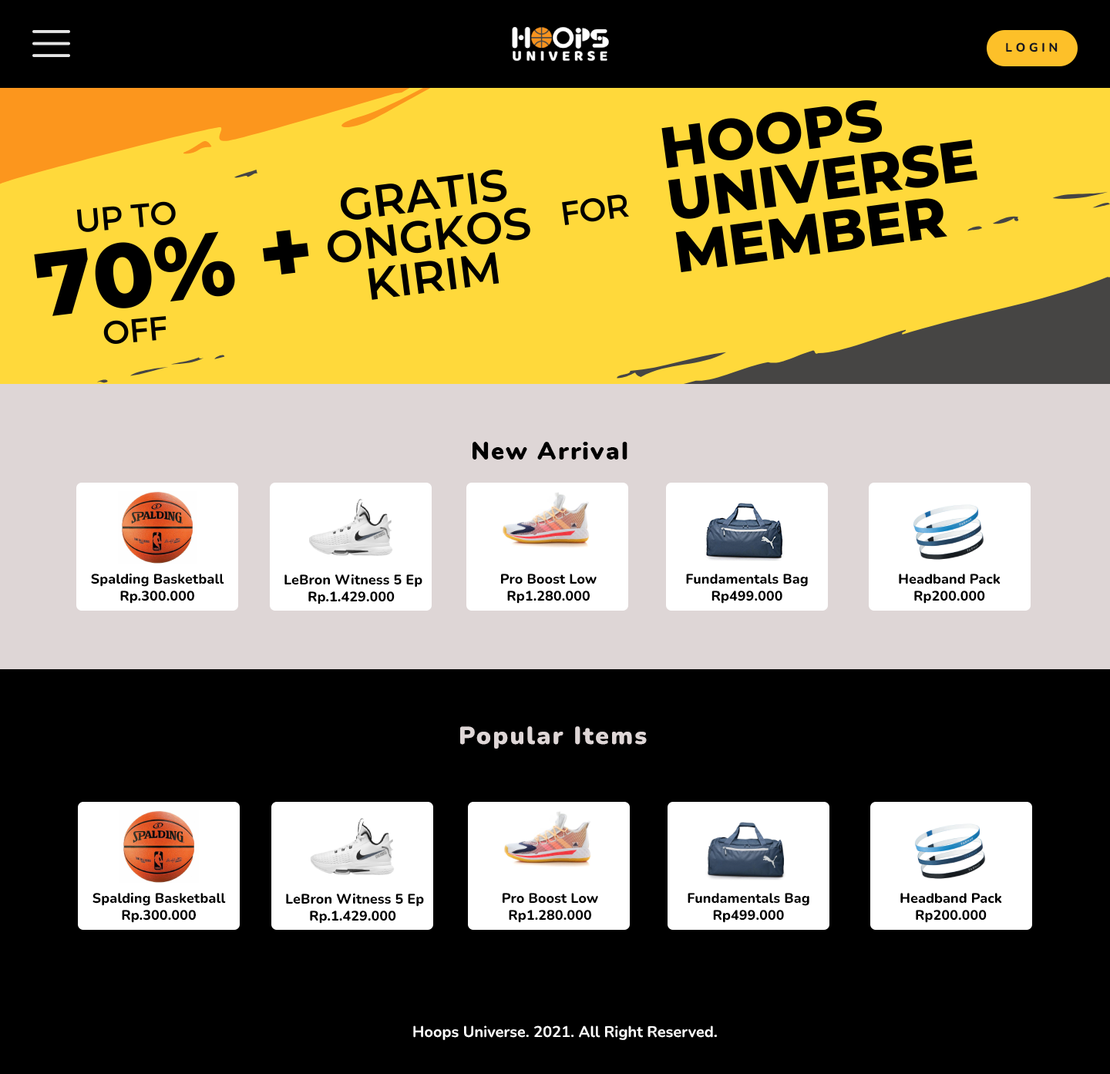
<style>
.page{position:relative;width:1110px;height:1074px;background:#000000}
.page>*{position:absolute;margin:0}
.t1{font:12.3px "Nunito-ExtraBold";color:#171820}
.t2{font:24.7px "Nunito-Black";letter-spacing:0.07em;color:#000000}
.t3{font:13.9px "Nunito-ExtraBold";color:#000000}
.t4{font:24.7px "Nunito-Black";letter-spacing:0.07em;color:#ded6d6}
.t5{font:15.4px "Nunito-Bold";color:#ffffff}
</style>
<div class="page">
<p class="t1" style="left:1006px;top:42px;width:52px;height:10px">L O G I N</p>
<p class="t2" style="left:473px;top:442px;width:155px;height:18px">New Arrival</p>
<p class="t3" style="left:91px;top:573px;width:133px;height:31px;text-align:center">Spalding Basketball<br>Rp.300.000</p>
<p class="t3" style="left:285px;top:574px;width:138px;height:30px;text-align:center">LeBron Witness 5 Ep<br>Rp.1.429.000</p>
<p class="t3" style="left:501px;top:574px;width:96px;height:30px;text-align:center">Pro Boost Low<br>Rp1.280.000</p>
<p class="t3" style="left:686px;top:574px;width:122px;height:30px;text-align:center">Fundamentals Bag<br>Rp499.000</p>
<p class="t3" style="left:899px;top:574px;width:102px;height:30px;text-align:center">Headband Pack<br>Rp200.000</p>
<p class="t4" style="left:460px;top:726px;width:187px;height:23px">Popular Items</p>
<p class="t3" style="left:93px;top:892px;width:133px;height:31px;text-align:center">Spalding Basketball<br>Rp.300.000</p>
<p class="t3" style="left:286px;top:893px;width:138px;height:31px;text-align:center">LeBron Witness 5 Ep<br>Rp.1.429.000</p>
<p class="t3" style="left:503px;top:893px;width:95px;height:30px;text-align:center">Pro Boost Low<br>Rp1.280.000</p>
<p class="t3" style="left:688px;top:893px;width:122px;height:30px;text-align:center">Fundamentals Bag<br>Rp499.000</p>
<p class="t3" style="left:901px;top:893px;width:101px;height:30px;text-align:center">Headband Pack<br>Rp200.000</p>
<p class="t5" style="left:413px;top:1025px;width:304px;height:15px">Hoops Universe. 2021. All Right Reserved.</p>
</div>
